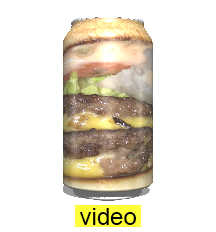
<style>
.page{position:relative;width:216px;height:232px;background:#ffffff}
.page>*{position:absolute;margin:0}
.t1{font:24px "ArialMT";color:#000000}
</style>
<div class="page">
<p class="t1" style="left:79px;top:208px;width:58px;height:17px">video</p>
</div>
